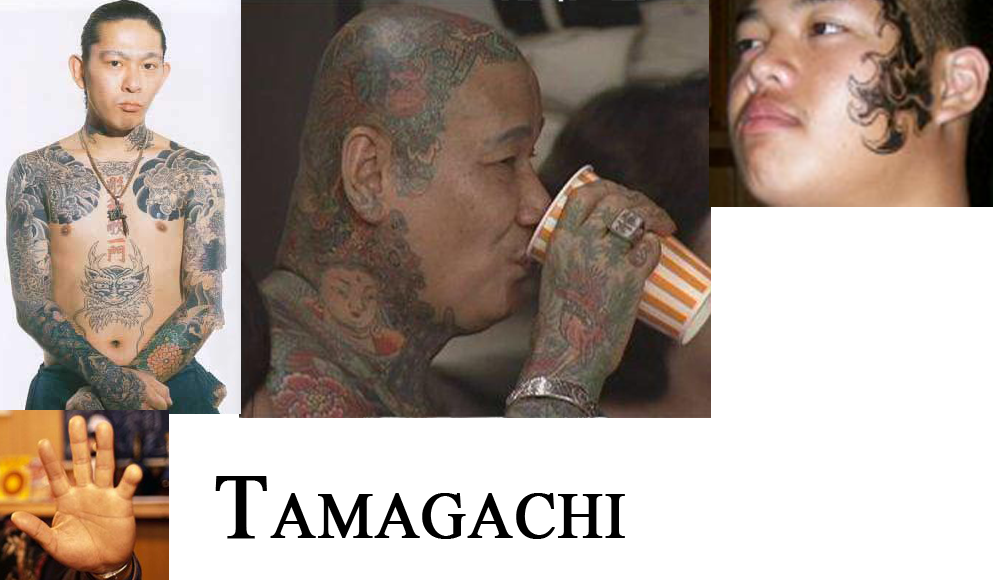
<style>
.page{position:relative;width:993px;height:585px;background:#ffffff}
.page>*{position:absolute;margin:0}
.t1{font:92.2px "TimesNewRomanPSMT";letter-spacing:0.01em;color:#000000;font-variant:small-caps;font-weight:bold;scale:0.95 1}
</style>
<div class="page">
<p class="t1" style="left:215px;top:476px;width:410px;height:63px">Tamagachi</p>
</div>
